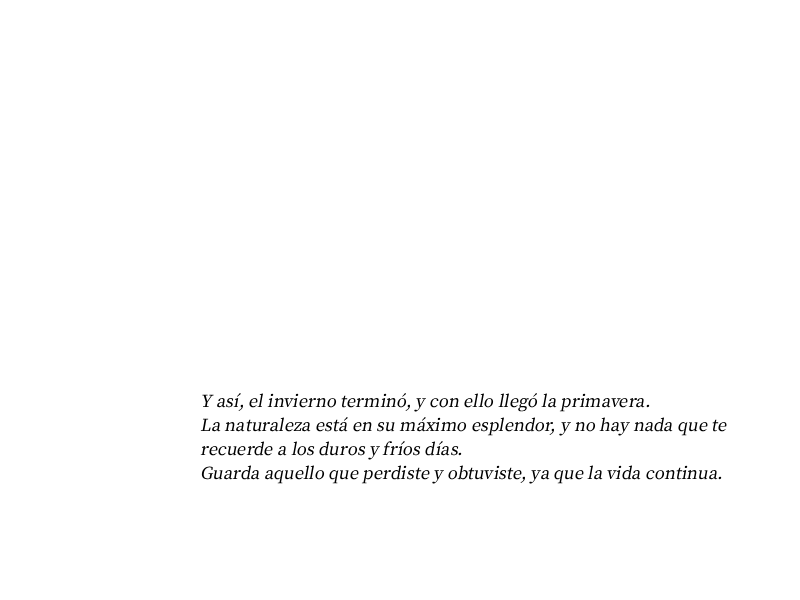
<style>
.page{position:relative;width:800px;height:600px;background:#ffffff}
.page>*{position:absolute;margin:0}
.t1{font:20px "OfficialFateFont-Medium";color:#000000;font-style:italic}
</style>
<div class="page">
<p class="t1" style="left:200px;top:393px;width:527px;height:91px">Y así, el invierno terminó, y con ello llegó la primavera.<br>La naturaleza está en su máximo esplendor, y no hay nada que te recuerde a los duros y fríos días.<br>Guarda aquello que perdiste y obtuviste, ya que la vida continua.</p>
</div>
